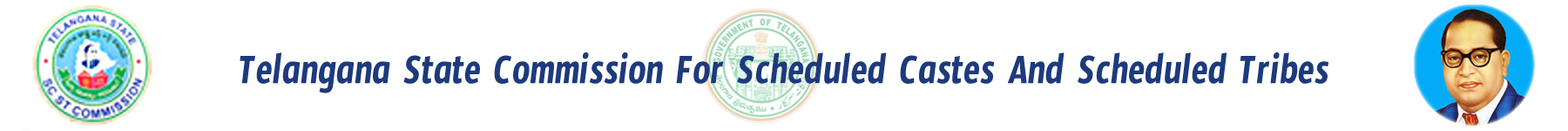
<style>
.page{position:relative;width:1568px;height:131px;background:#ffffff}
.page>*{position:absolute;margin:0}
.t1{font:44.3px "TimmanaRegular";color:#1d3a7c;scale:0.86 1}
</style>
<div class="page">
<p class="t1" style="left:240px;top:51px;width:1088px;height:42px">Telangana State Commission For Scheduled Castes And Scheduled Tribes</p>
</div>
